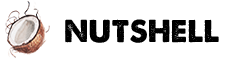
<style>
.page{position:relative;width:227px;height:62px;background:#ffffff}
.page>*{position:absolute;margin:0}
.t1{font:30px "ALoveofThunder";color:#000000;text-transform:uppercase}
</style>
<div class="page">
<p class="t1" style="left:65px;top:19px;width:154px;height:24px">NUTSHELL</p>
</div>
